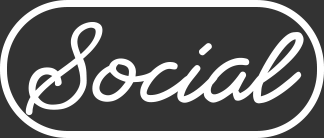
<style>
.page{position:relative;width:324px;height:138px;background:#333333}
.page>*{position:absolute;margin:0}
.t1{font:104.7px "d_CCMatineeIdol";color:#ffffff}
</style>
<div class="page">
<p class="t1" style="left:25px;top:22px;width:279px;height:94px">Social</p>
</div>
